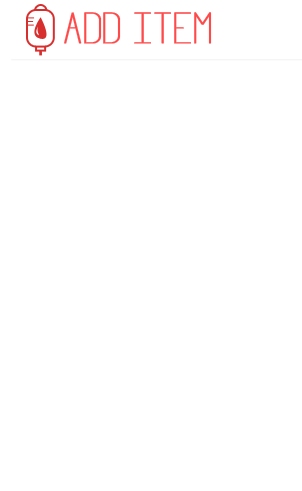
<style>
.page{position:relative;width:302px;height:491px;background:#ffffff}
.page>*{position:absolute;margin:0}
.t1{font:43.8px "Infinity";letter-spacing:-0.02em;color:#ff4a4a;font-weight:bold}
</style>
<div class="page">
<p class="t1" style="left:64px;top:12px;width:148px;height:32px">ADD ITEM</p>
</div>
